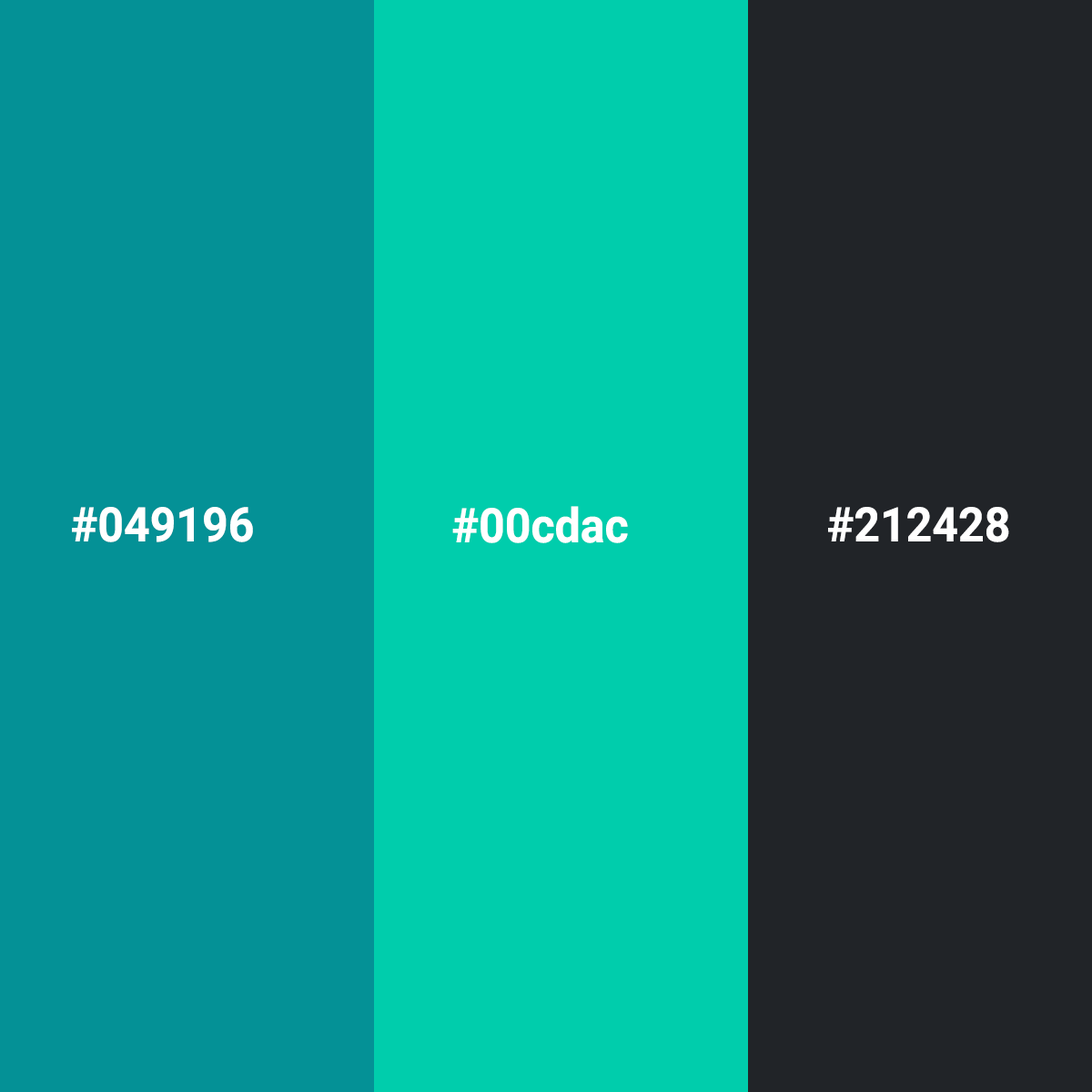
<style>
.page{position:relative;width:1092px;height:1092px;background:#049196}
.page>*{position:absolute;margin:0}
.t1{font:47.8px "Roboto-Bold";color:#ffffff;scale:0.95 1}
</style>
<div class="page">
<p class="t1" style="left:72px;top:507px;width:181px;height:35px">#049196</p>
<p class="t1" style="left:452px;top:506px;width:176px;height:37px">#00cdac</p>
<p class="t1" style="left:828px;top:507px;width:181px;height:35px">#212428</p>
</div>
